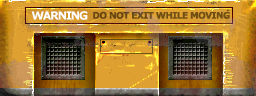
<style>
.page{position:relative;width:256px;height:96px}
.page>*{position:absolute;margin:0}
.t1{font:11px "Verdana-Bold";letter-spacing:-0.1em;color:#ffffff}
.t2{font:9px "Verdana-Bold";letter-spacing:-0.06em;color:#6f4f13}
</style>
<div class="page">
<p class="t1" style="left:31px;top:11px;width:57px;height:9px">WARNING</p>
<p class="t2" style="left:93px;top:11px;width:137px;height:8px">DO NOT EXIT WHILE MOVING</p>
</div>
